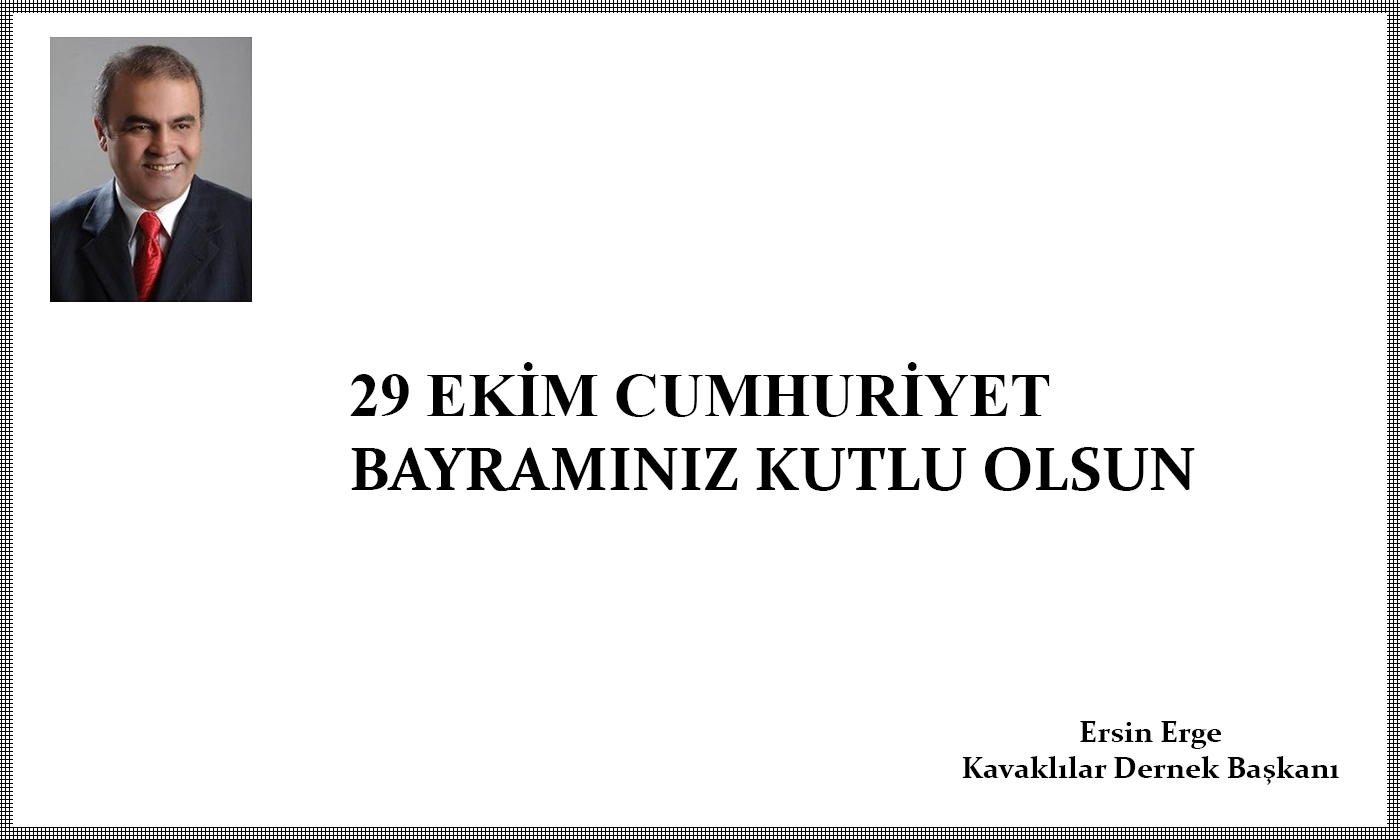
<style>
.page{position:relative;width:1400px;height:840px;background:#ffffff}
.page>*{position:absolute;margin:0}
.t1{font:62px "Constantia-Bold";color:#000000}
.t2{font:62px "TimesNewRomanPS-BoldMT";color:#000000}
.t3{font:30px "Constantia-Bold";color:#000000}
</style>
<div class="page">
<p class="t1" style="left:350px;top:362px;width:845px;height:129px"><span class="t2">29 EKİM CUMHURİYET<br></span>BAYRAMINIZ KUTLU OLSUN</p>
<p class="t3" style="left:962px;top:721px;width:377px;height:64px;text-align:center">Ersin Erge<br>Kavaklılar Dernek Başkanı</p>
</div>
